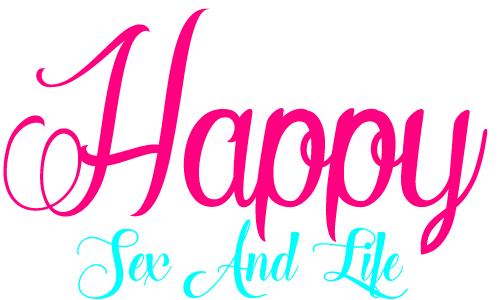
<style>
.page{position:relative;width:500px;height:300px;background:#ffffff}
.page>*{position:absolute;margin:0}
.t1{font:290px "LaCitdesMilleReines";color:#ff0080}
.t2{font:70px "TheHeartofEverythingDemo";color:#00fefe}
</style>
<div class="page">
<p class="t1" style="left:3px;top:8px;width:485px;height:247px">Happy</p>
<p class="t2" style="left:77px;top:219px;width:331px;height:80px">Sex And Life</p>
</div>
